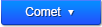
<style>
.page{position:relative;width:102px;height:27px}
.page>*{position:absolute;margin:0}
.t1{font:12px "ArialUnicodeMS";color:#ffffff}
</style>
<div class="page">
<p class="t1" style="left:25px;top:7px;width:49px;height:9px">Comet  ▼</p>
</div>
